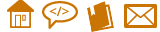
<style>
.page{position:relative;width:160px;height:32px;background:#ffffff}
.page>*{position:absolute;margin:0}
.t1{font:12.9px "OpenSans-Semibold";color:#ca7404}
</style>
<div class="page">
<p class="t1" style="left:49px;top:6px;width:20px;height:10px">&lt;/&gt;</p>
</div>
